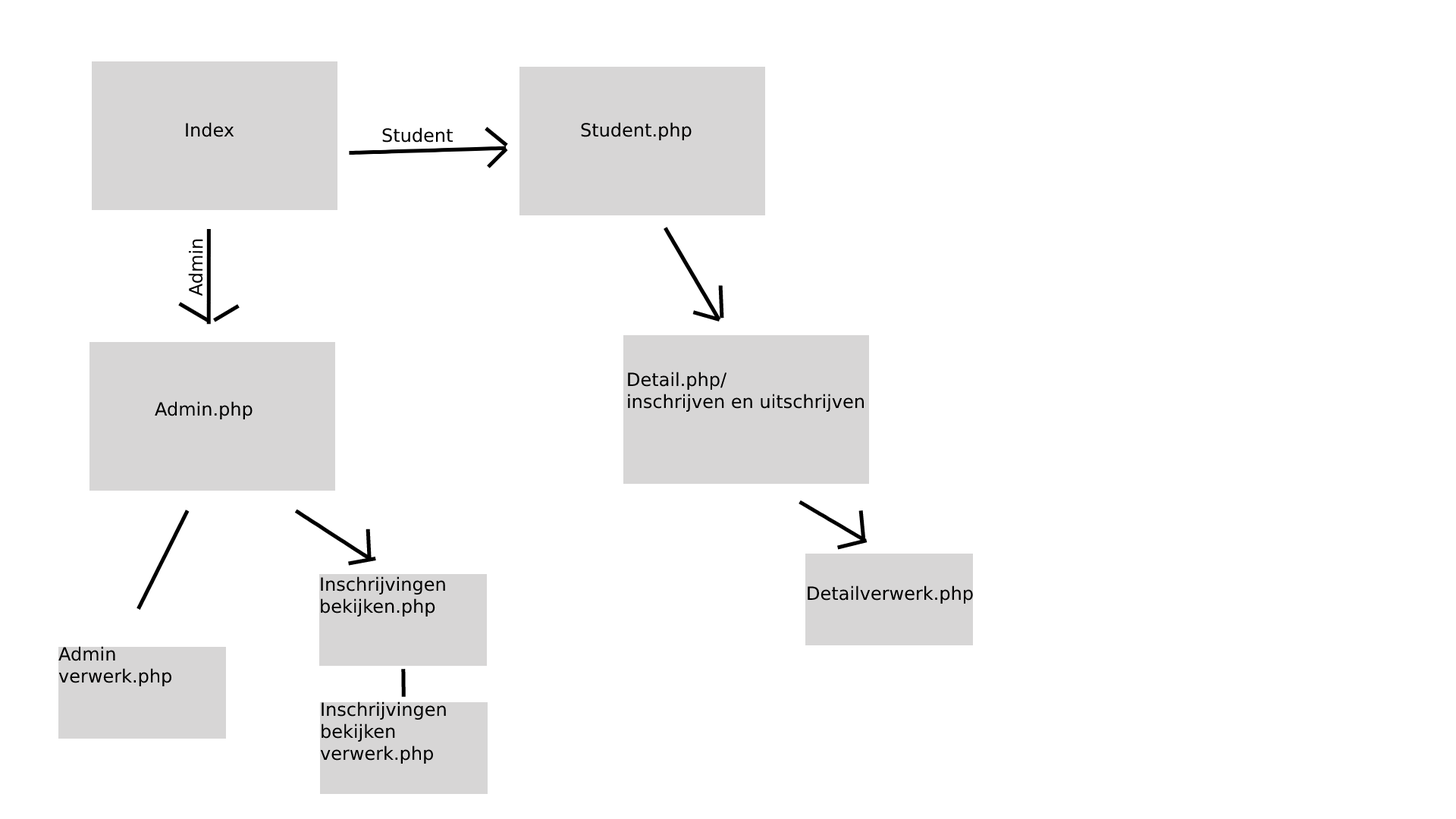
<style>
.page{position:relative;width:1456px;height:819px;background:#ffffff}
.page>*{position:absolute;margin:0}
.t1{font:18.2px "DejaVuSans";color:#000000}
</style>
<div class="page">
<p class="t1" style="left:186px;top:122px;width:48px;height:15px">Index</p>
<p class="t1" style="left:581px;top:122px;width:111px;height:18px">Student.php</p>
<p class="t1" style="left:382px;top:127px;width:71px;height:16px">Student</p>
<p class="t1" style="left:628px;top:372px;width:236px;height:40px">Detail.php/<br>inschrijven en uitschrijven</p>
<p class="t1" style="left:155px;top:401px;width:98px;height:18px">Admin.php</p>
<p class="t1" style="left:321px;top:576px;width:124px;height:41px">Inschrijvingen bekijken.php</p>
<p class="t1" style="left:808px;top:585px;width:165px;height:19px">Detailverwerk.php</p>
<p class="t1" style="left:58px;top:646px;width:113px;height:40px">Admin verwerk.php</p>
<p class="t1" style="left:320px;top:701px;width:126px;height:63px">Inschrijvingen<br>bekijken<br>verwerk.php</p>
</div>
